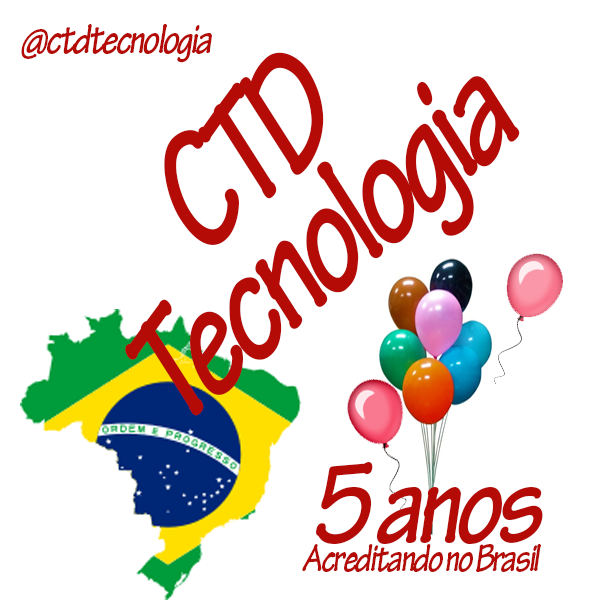
<style>
.page{position:relative;width:600px;height:600px;background:#ffffff}
.page>*{position:absolute;margin:0}
.t1{font:43.9px "TektonPro-BoldObl";letter-spacing:-0.06em;color:#b40b07;scale:0.84 1}
.t2{font:165.3px/116.2px "TektonPro-BoldObl";letter-spacing:-0.06em;color:#b40b07;scale:0.84 1}
.t3{font:121.4px "TektonPro-BoldObl";letter-spacing:-0.06em;color:#b40b07;scale:0.84 1}
.t4{font:40.5px "TektonPro-BoldObl";letter-spacing:-0.06em;color:#b40b07;scale:0.84 1}
</style>
<div class="page">
<p class="t1" style="left:21px;top:24px;width:191px;height:39px">@ctdtecnologia</p>
<p class="t2" style="left:125px;top:52px;width:395px;height:364px;text-align:center;rotate:-41deg">CTD<br>Tecnologia</p>
<p class="t3" style="left:316px;top:462px;width:227px;height:82px">5 anos</p>
<p class="t4" style="left:302px;top:544px;width:239px;height:28px">Acreditando no Brasil</p>
</div>
